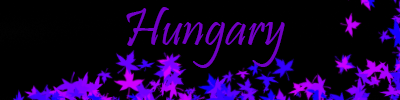
<style>
.page{position:relative;width:400px;height:100px;background:#000000}
.page>*{position:absolute;margin:0}
.t1{font:54px "Pristina-Regular";color:#7100c5}
</style>
<div class="page">
<p class="t1" style="left:126px;top:7px;width:159px;height:61px">Hungary</p>
</div>
